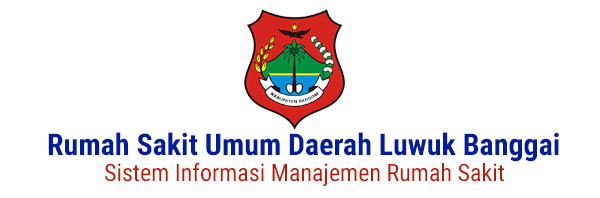
<style>
.page{position:relative;width:600px;height:198px;background:#ffffff}
.page>*{position:absolute;margin:0}
.t1{font:30px "RobotoCondensed-Bold";color:#021c9e}
.t2{font:24px "RobotoCondensed-Regular";color:#c01903}
</style>
<div class="page">
<p class="t1" style="left:48px;top:132px;width:511px;height:30px">Rumah Sakit Umum Daerah Luwuk Banggai</p>
<p class="t2" style="left:105px;top:162px;width:399px;height:24px">Sistem Informasi Manajemen Rumah Sakit</p>
</div>
